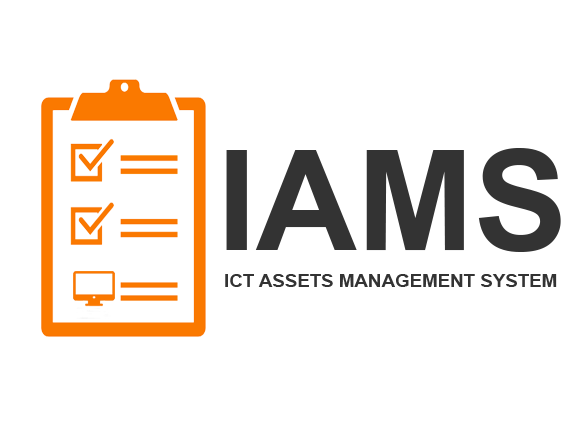
<style>
.page{position:relative;width:578px;height:432px;background:#ffffff}
.page>*{position:absolute;margin:0}
.t1{font:140px "Arial-BoldMT";color:#333333}
.t2{font:18px "Arial-BoldMT";color:#333333;scale:1.04 1}
</style>
<div class="page">
<p class="t1" style="left:226px;top:148px;width:335px;height:104px">IAMS</p>
<p class="t2" style="left:225px;top:274px;width:332px;height:13px">ICT ASSETS MANAGEMENT SYSTEM</p>
</div>
